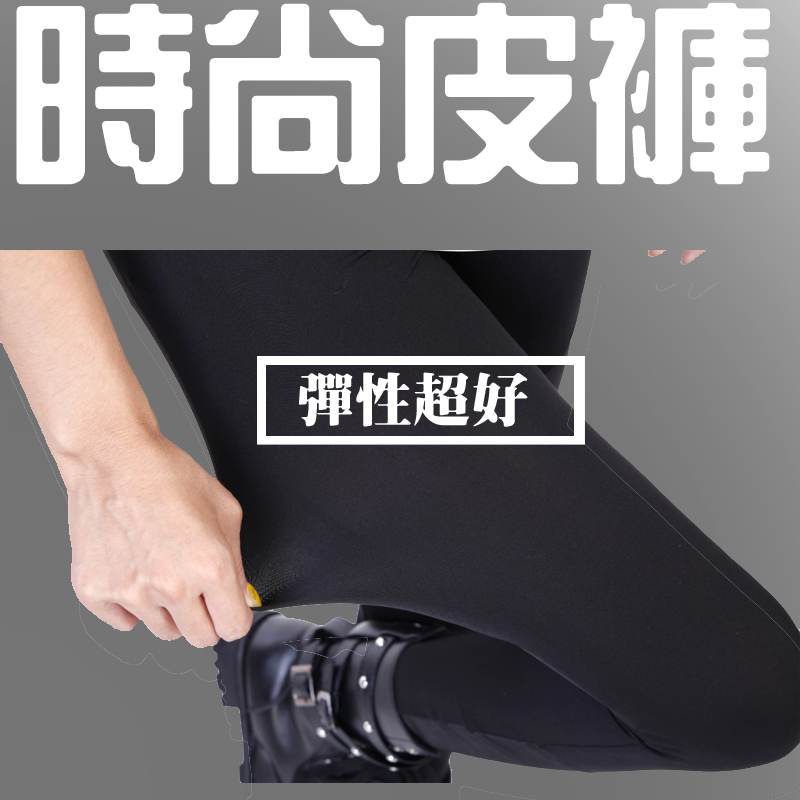
<style>
.page{position:relative;width:800px;height:800px}
.page>*{position:absolute;margin:0}
.t1{font:192.4px "HanWangZonYi";color:#ffffff}
.t2{font:58.4px "HanWangMingBlack";color:#ffffff}
</style>
<div class="page">
<p class="t1" style="left:16px;top:2px;width:754px;height:183px">時尚皮褲</p>
<p class="t2" style="left:299px;top:372px;width:229px;height:55px">彈性超好</p>
</div>
